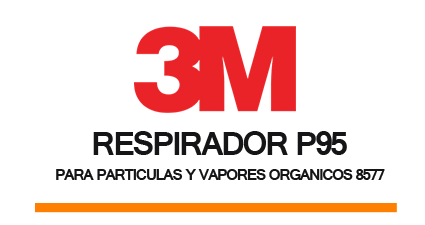
<style>
.page{position:relative;width:425px;height:225px;background:#ffffff}
.page>*{position:absolute;margin:0}
.t1{font:16.7px/25px "Raavi-Bold";letter-spacing:-0.08em;color:#151517;text-transform:uppercase}
.t2{font:36.3px/40.4px "Raavi-Bold";letter-spacing:-0.08em;color:#151517;text-transform:uppercase}
.t3{font:77.5px/25px "Raavi-Bold";letter-spacing:-0.12em;color:#0a2c5c;text-transform:uppercase}
</style>
<div class="page">
<p class="t1" style="left:56px;top:131px;width:329px;height:49px;text-align:center"><span class="t2">RESPIRADOR P95 </span><span class="t3"><br></span>PARA PARTICULAS Y VAPORES ORGANICOS 8577</p>
</div>
